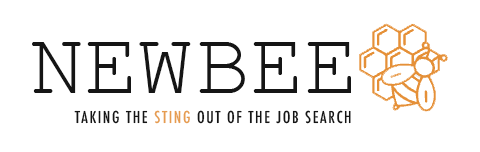
<style>
.page{position:relative;width:480px;height:152px;background:#ffffff}
.page>*{position:absolute;margin:0}
.t1{font:90px "CourierNewPSMT";color:#151515}
.t2{font:16px "Futura-CondensedMedium";letter-spacing:0.1em;color:#151515}
.t3{font:16px "Futura-CondensedMedium";letter-spacing:0.1em;color:#e69c4f}
</style>
<div class="page">
<p class="t1" style="left:32px;top:42px;width:159px;height:51px">NEW</p>
<p class="t1" style="left:199px;top:42px;width:152px;height:51px">BEE</p>
<p class="t2" style="left:74px;top:110px;width:277px;height:14px">TAKING THE<span class="t3"> STING </span>OUT OF THE JOB SEARCH</p>
</div>
